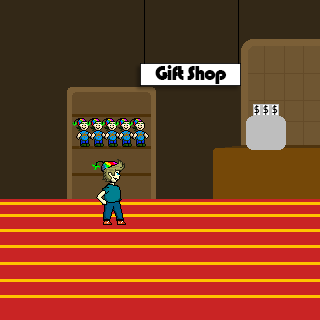
<style>
.page{position:relative;width:320px;height:320px;background:#332817}
.page>*{position:absolute;margin:0}
.t1{font:20.8px "Bauhaus93";letter-spacing:-0.06em;color:#000000}
.t2{font:8.5px "ComicSansMS";letter-spacing:-0.06em;color:#000000}
</style>
<div class="page">
<p class="t1" style="left:155px;top:65px;width:72px;height:19px">Gift Shop</p>
<p class="t2" style="left:254px;top:105px;width:6px;height:10px">$</p>
<p class="t2" style="left:263px;top:105px;width:6px;height:10px">$</p>
<p class="t2" style="left:272px;top:105px;width:6px;height:10px">$</p>
</div>
